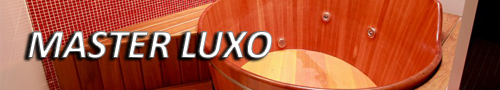
<style>
.page{position:relative;width:500px;height:90px}
.page>*{position:absolute;margin:0}
.t1{font:41.9px "Calibri-BoldItalic"}
</style>
<div class="page">
<p class="t1" style="left:27px;top:31px;width:245px;height:28px">MASTER LUXO</p>
<p class="t1" style="left:28px;top:31px;width:245px;height:28px">MASTER LUXO</p>
</div>
